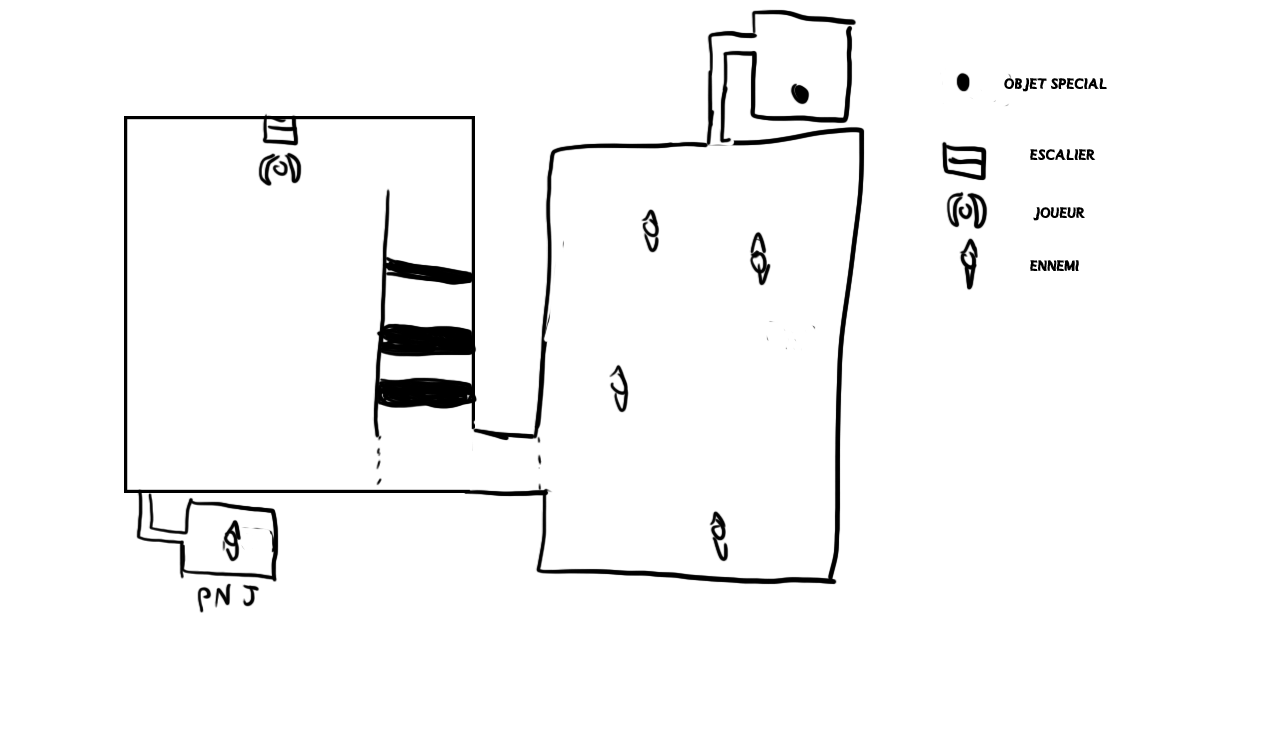
<style>
.page{position:relative;width:1286px;height:752px;background:#ffffff}
.page>*{position:absolute;margin:0}
.t1{font:15.4px "MANOLETE";color:#000000}
</style>
<div class="page">
<p class="t1" style="left:1004px;top:78px;width:103px;height:14px">objet spécial</p>
<p class="t1" style="left:1030px;top:149px;width:66px;height:11px">escalier</p>
<p class="t1" style="left:1033px;top:207px;width:52px;height:14px">Joueur</p>
<p class="t1" style="left:1030px;top:260px;width:49px;height:11px">ennemi</p>
</div>
